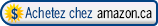
<style>
.page{position:relative;width:158px;height:26px}
.page>*{position:absolute;margin:0}
.t1{font:14px "BentonGothicCond-Bold";color:#024182}
.t2{font:14.6px "BentonGothicCond-Regular";color:#024182;scale:0.93 1}
.t3{font:14.6px "BentonGothicCond-Regular";color:#000000;scale:0.93 1}
</style>
<div class="page">
<p class="t1" style="left:11px;top:7px;width:7px;height:14px">$</p>
<p class="t2" style="left:25px;top:7px;width:68px;height:12px">Achetez chez</p>
<p class="t3" style="left:97px;top:10px;width:55px;height:9px">amazon.ca</p>
</div>
